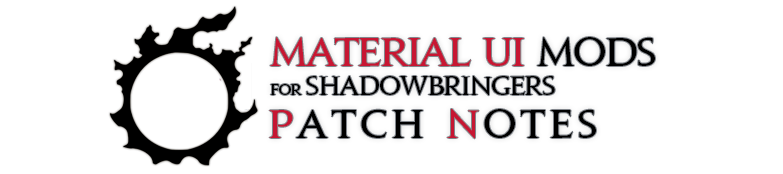
<style>
.page{position:relative;width:783px;height:174px;background:#ffffff}
.page>*{position:absolute;margin:0}
.t1{font:24px "JupiterPro-Bold";letter-spacing:-0.05em;color:#000000}
.t2{font:36px "JupiterPro-Bold";letter-spacing:-0.05em;color:#c71632}
.t3{font:36px "JupiterPro-Bold";letter-spacing:-0.05em;color:#000000}
.t4{font:14px "JupiterPro-Bold";letter-spacing:-0.05em;color:#000000}
.t5{font:36px "JupiterPro-Bold";letter-spacing:0.1em;color:#000000}
.t6{font:36px "JupiterPro-Bold";letter-spacing:0.1em;color:#c61632}
</style>
<div class="page">
<p class="t1" style="left:270px;top:37px;width:385px;height:59px"><span class="t2">material ui </span><span class="t3">mods<br></span><span class="t4">for </span>shadowbringers</p>
<p class="t5" style="left:269px;top:109px;width:327px;height:30px"><span class="t6">P</span>ATCH <span class="t6">N</span>OTES</p>
</div>
